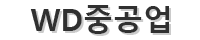
<style>
.page{position:relative;width:200px;height:40px;background:#ffffff}
.page>*{position:absolute;margin:0}
.t1{font:30px "MalgunGothicBold";color:#303030}
</style>
<div class="page">
<p class="t1" style="left:30px;top:5px;width:139px;height:29px">WD중공업</p>
</div>
